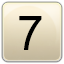
<style>
.page{position:relative;width:64px;height:64px}
.page>*{position:absolute;margin:0}
.t1{font:48px "ArialMT";color:#000000}
</style>
<div class="page">
<p class="t1" style="left:19px;top:16px;width:23px;height:34px">7</p>
</div>
